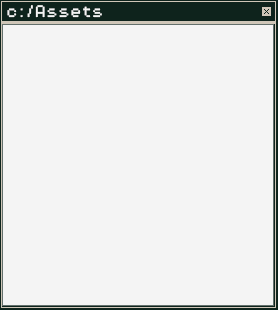
<style>
.page{position:relative;width:278px;height:310px;background:#f4f4f4}
.page>*{position:absolute;margin:0}
.t1{font:13.5px "PixelOperator8";color:#f4f4f4}
</style>
<div class="page">
<p class="t1" style="left:7px;top:5px;width:95px;height:13px">c:/Assets</p>
</div>
